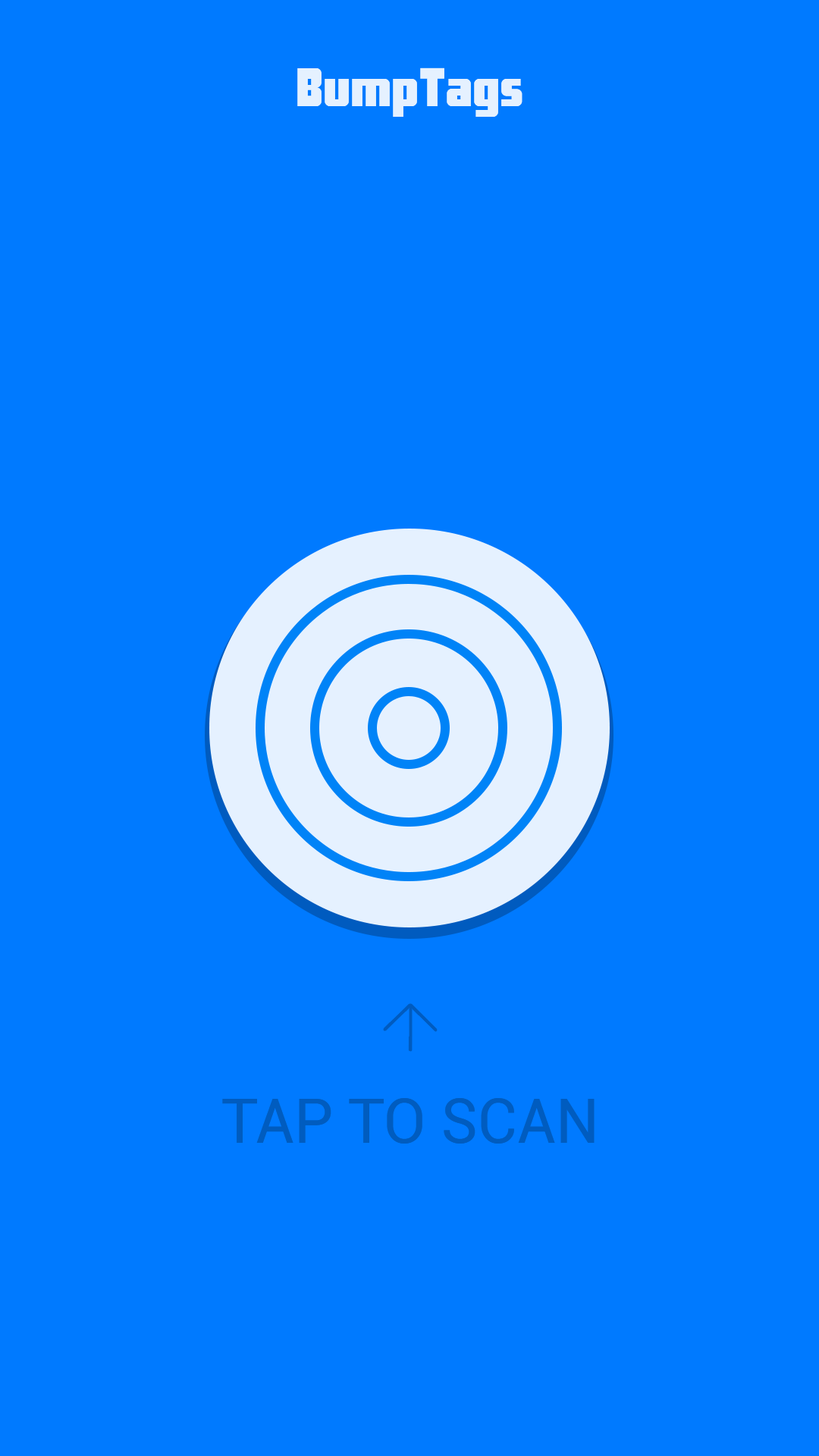
<style>
.page{position:relative;width:819px;height:1456px;background:#007aff}
.page>*{position:absolute;margin:0}
.t1{font:54.6px "CostaRica";color:#e5f1ff}
.t2{font:61.2px "Roboto-Regular";color:#005cbf}
</style>
<div class="page">
<p class="t1" style="left:297px;top:67px;width:225px;height:50px">BumpTags</p>
<p class="t2" style="left:222px;top:1098px;width:373px;height:46px">TAP TO SCAN</p>
</div>
